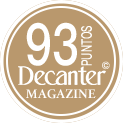
<style>
.page{position:relative;width:123px;height:123px;background:#b9986d}
.page>*{position:absolute;margin:0}
.t1{font:58px "PingFangTC-Semibold";color:#ffffff;scale:0.77 1}
.t2{font:14.7px "PingFangTC-Semibold";color:#ffffff;scale:0.67 1}
.t3{font:10.1px "PingFangTC-Semibold"}
.t4{font:13.4px "Athelas-Bold";color:#ffffff}
</style>
<div class="page">
<p class="t1" style="left:26px;top:22px;width:51px;height:44px">93</p>
<p class="t2" style="left:81px;top:26px;width:11px;height:40px;rotate:-90deg">PUNTOS</p>
<p class="t3" style="left:102px;top:61px;width:8px;height:9px">©</p>
<p class="t4" style="left:26px;top:89px;width:70px;height:10px">MAGAZINE</p>
</div>
